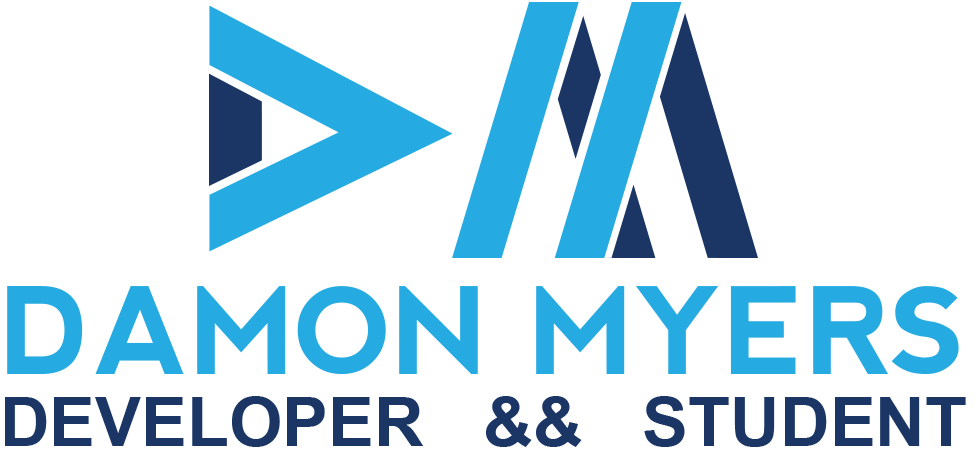
<style>
.page{position:relative;width:975px;height:455px;background:#ffffff}
.page>*{position:absolute;margin:0}
.t1{font:96px/72px "Utsaah-Bold";color:#1b3664}
.t2{font:120px/72px "nevis-Bold";color:#25aae1}
</style>
<div class="page">
<p class="t1" style="left:5px;top:286px;width:961px;height:161px;text-align:justify"><span class="t2">DAMON MYERS<br></span>DEVELOPER &amp;&amp; STUDENT</p>
</div>
